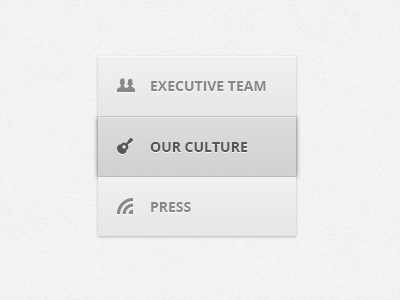
<style>
.page{position:relative;width:400px;height:300px}
.page>*{position:absolute;margin:0}
.t1{font:14px "OpenSans-Bold";color:#888888;text-transform:uppercase}
.t2{font:14px "OpenSans-Bold";color:#575757;text-transform:uppercase}
</style>
<div class="page">
<p class="t1" style="left:151px;top:81px;width:115px;height:10px">Executive Team</p>
<p class="t2" style="left:150px;top:142px;width:98px;height:10px">Our Culture</p>
<p class="t2" style="left:150px;top:142px;width:98px;height:10px">Our Culture</p>
<p class="t1" style="left:151px;top:202px;width:40px;height:10px">Press</p>
</div>
